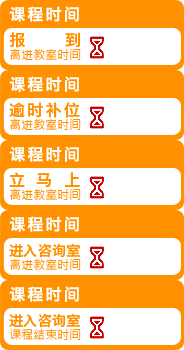
<style>
.page{position:relative;width:184px;height:350px;background:#ff9000}
.page>*{position:absolute;margin:0}
.t1{font:16px "HiraginoSansGB-W6";letter-spacing:0.14em;color:#ffffff}
.t2{font:16px "HiraginoSansGB-W6";letter-spacing:0.14em;color:#ff9000}
.t3{font:12px "MicrosoftJhengHeiRegular";color:#ff9000}
.t4{font:16px "HiraginoSansGB-W6";letter-spacing:0.72em;color:#ff9000}
.t5{font:14px "HiraginoSansGB-W6";letter-spacing:0.02em;color:#ff9000}
</style>
<div class="page">
<p class="t1" style="left:9px;top:6px;width:70px;height:16px">课程时间</p>
<p class="t2" style="left:9px;top:32px;width:71px;height:16px">报     到</p>
<p class="t3" style="left:10px;top:48px;width:71px;height:12px">离进教室时间</p>
<p class="t1" style="left:9px;top:76px;width:70px;height:16px">课程时间</p>
<p class="t2" style="left:9px;top:102px;width:71px;height:16px">逾时补位</p>
<p class="t3" style="left:10px;top:118px;width:71px;height:12px">离进教室时间</p>
<p class="t1" style="left:9px;top:146px;width:70px;height:16px">课程时间</p>
<p class="t4" style="left:9px;top:172px;width:71px;height:16px">立马上</p>
<p class="t3" style="left:10px;top:188px;width:71px;height:12px">离进教室时间</p>
<p class="t1" style="left:9px;top:216px;width:70px;height:16px">课程时间</p>
<p class="t5" style="left:9px;top:243px;width:72px;height:15px">进入咨询室</p>
<p class="t3" style="left:10px;top:258px;width:71px;height:12px">离进教室时间</p>
<p class="t1" style="left:9px;top:286px;width:70px;height:16px">课程时间</p>
<p class="t5" style="left:9px;top:313px;width:72px;height:15px">进入咨询室</p>
<p class="t3" style="left:9px;top:328px;width:72px;height:12px">课程结束时间</p>
</div>
